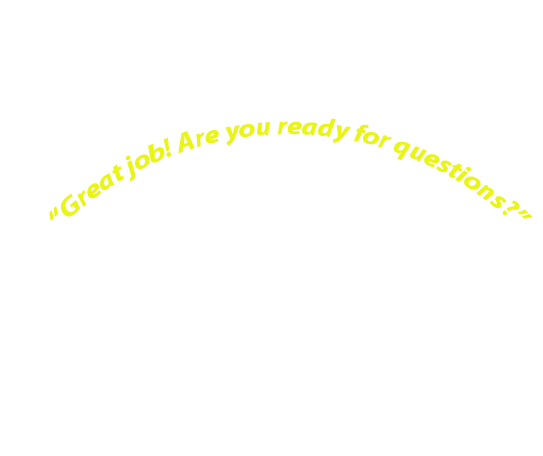
<style>
.page{position:relative;width:543px;height:456px;background:#ffffff}
.page>*{position:absolute;margin:0}
.t1{font:25.1px "MyriadPro-BoldIt";letter-spacing:0.01em;color:#e8f515}
</style>
<div class="page">
<p class="t1" style="left:49px;top:118px;width:484px;height:103px">“Great job! Are you ready for questions?”</p>
</div>
